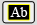
<style>
.page{position:relative;width:37px;height:25px}
.page>*{position:absolute;margin:0}
.t1{font:14px "TimesNewRomanPSMT";color:#ffffff}
</style>
<div class="page">
<p class="t1" style="left:10px;top:7px;width:18px;height:10px">Ab</p>
</div>
